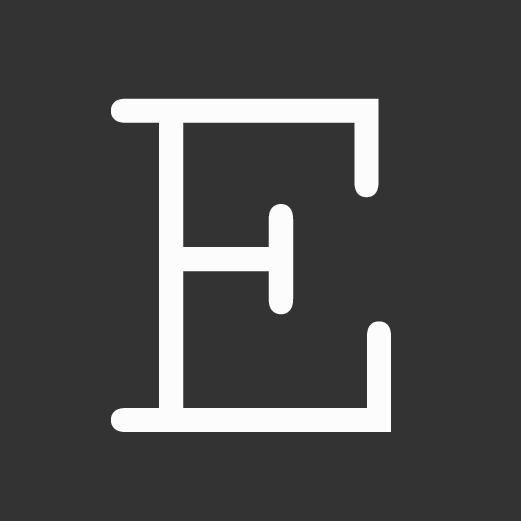
<style>
.page{position:relative;width:521px;height:521px;background:#333333}
.page>*{position:absolute;margin:0}
.t1{font:583.3px "CourierNewPSMT";color:#fdfcfc}
</style>
<div class="page">
<p class="t1" style="left:111px;top:98px;width:280px;height:334px">E</p>
</div>
